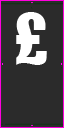
<style>
.page{position:relative;width:64px;height:128px;background:#2b2b2b}
.page>*{position:absolute;margin:0}
.t1{font:64px "Impact";color:#ffffff}
</style>
<div class="page">
<p class="t1" style="left:16px;top:12px;width:31px;height:53px">£</p>
</div>
